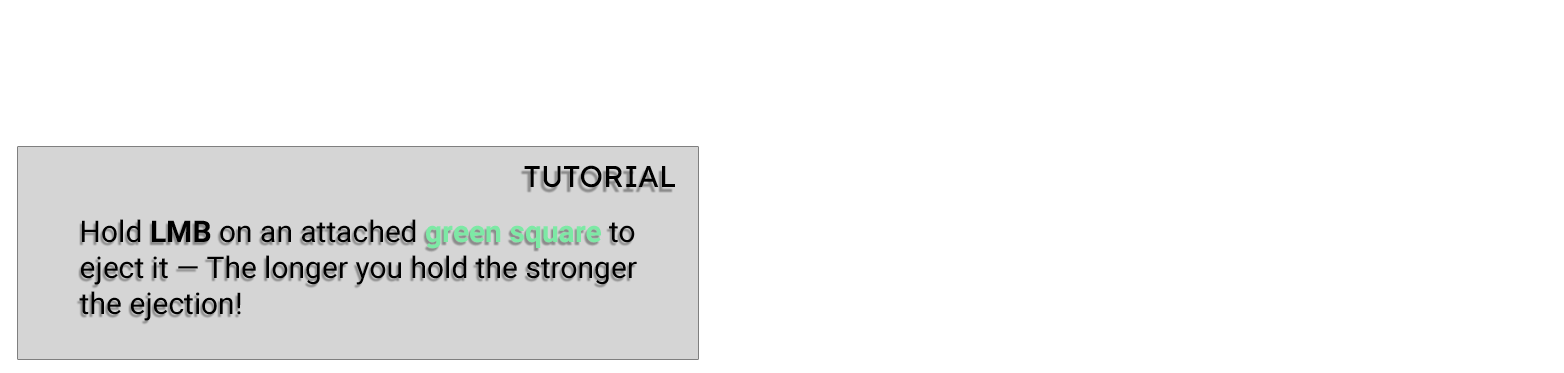
<style>
.page{position:relative;width:1564px;height:373px;background:#ffffff}
.page>*{position:absolute;margin:0}
.t1{font:30px "LexendDeca-Regular";color:#000000}
.t2{font:30px "Roboto-Regular";color:#000000}
.t3{font:30px "Roboto-Bold";color:#000000}
.t4{font:30px "Roboto-Bold";color:#7de9a5}
</style>
<div class="page">
<p class="t1" style="left:524px;top:165px;width:151px;height:23px">TUTORIAL</p>
<p class="t2" style="left:79px;top:219px;width:558px;height:102px">Hold <span class="t3">LMB</span> on an attached <span class="t4">green square </span>to<br>eject it — The longer you hold the stronger<br>the ejection!</p>
</div>
